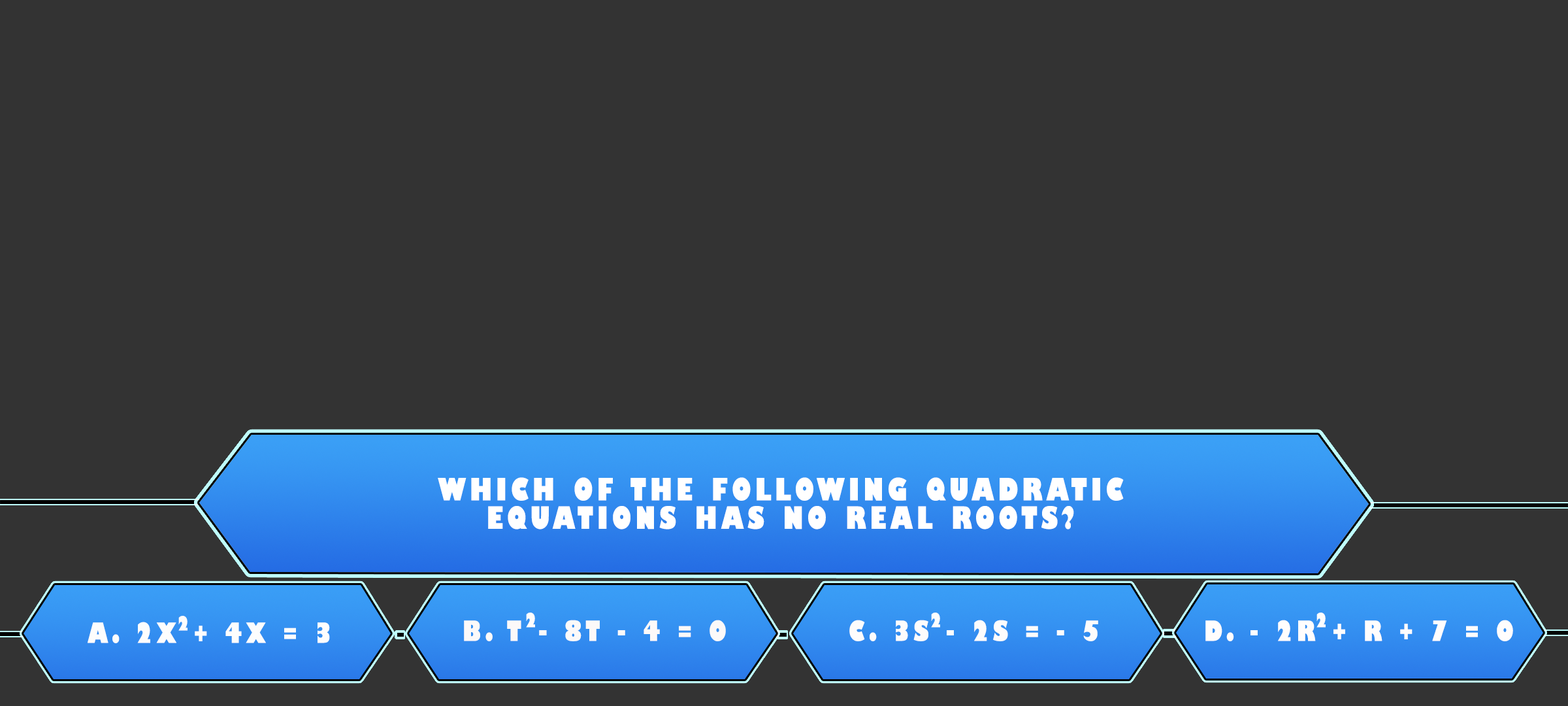
<style>
.page{position:relative;width:1568px;height:706px;background:#333333}
.page>*{position:absolute;margin:0}
.t1{font:30px/28.4px "GillSans-UltraBoldCondensed";letter-spacing:0.115em;color:#ffffff;text-transform:uppercase;scale:1.12 1}
.t2{font:19.1px "GillSans-UltraBoldCondensed";letter-spacing:0.115em;color:#fdfdfd;text-transform:uppercase;scale:1.12 1}
.t3{font:27.2px "GillSans-UltraBoldCondensed";letter-spacing:0.115em;color:#fdfdfd;text-transform:uppercase;scale:1.12 1}
.t4{font:27.2px "GillSans-UltraBoldCondensed";letter-spacing:0.115em;color:#fcf9f9;text-transform:uppercase;scale:1.12 1}
.t5{font:27.2px "GillSans-UltraBoldCondensed";letter-spacing:0.115em;color:#fdfcfc;text-transform:uppercase;scale:1.12 1}
.t6{font:27.2px "GillSans-UltraBoldCondensed";letter-spacing:0.115em;color:#fffdfd;text-transform:uppercase;scale:1.12 1}
</style>
<div class="page">
<p class="t1" style="left:438px;top:477px;width:686px;height:52px;text-align:center">Which of the following quadratic<br>equations has no real roots?</p>
<p class="t2" style="left:178px;top:615px;width:10px;height:15px">2</p>
<p class="t2" style="left:526px;top:612px;width:9px;height:15px">2</p>
<p class="t2" style="left:931px;top:612px;width:9px;height:15px">2</p>
<p class="t2" style="left:1316px;top:612px;width:10px;height:15px">2</p>
<p class="t3" style="left:88px;top:621px;width:242px;height:22px">A. 2x + 4x = 3</p>
<p class="t4" style="left:464px;top:619px;width:262px;height:22px">B. t - 8t - 4 = 0</p>
<p class="t5" style="left:849px;top:619px;width:249px;height:22px">C. 3s - 2s = - 5</p>
<p class="t6" style="left:1205px;top:619px;width:308px;height:22px">D. - 2r + r + 7 = 0</p>
</div>
